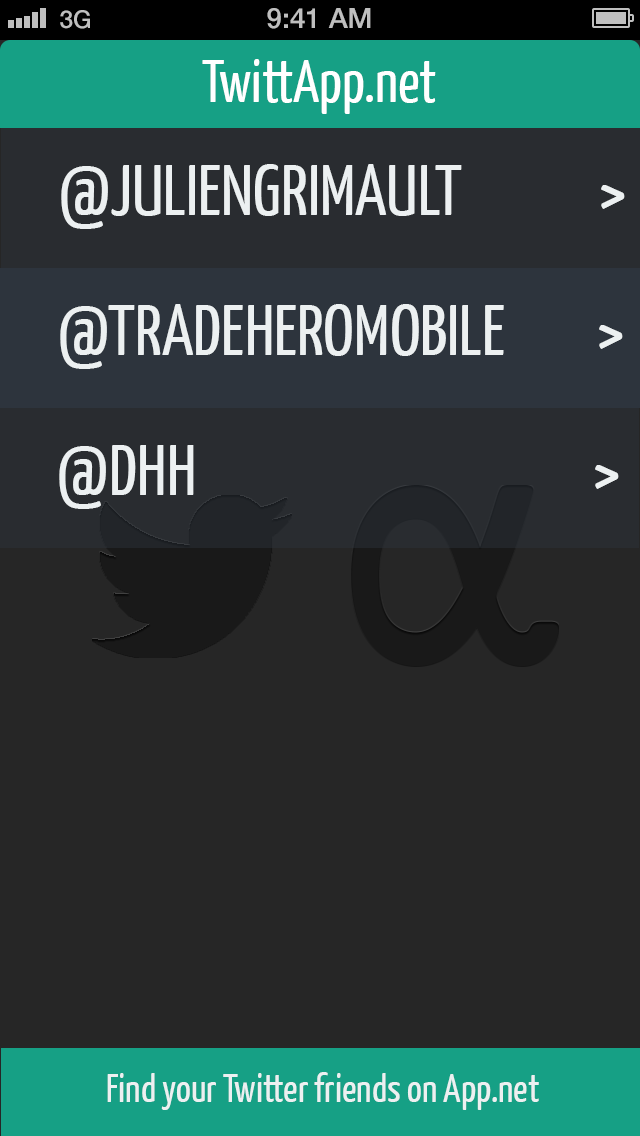
<style>
.page{position:relative;width:640px;height:1136px;background:#262626}
.page>*{position:absolute;margin:0}
.t1{font:24.5px "HelveticaNeue-Medium";color:#bfbfbf}
.t2{font:28.1px "HelveticaNeue-Medium";color:#bfbfbf}
.t3{font:60px "YanoneKaffeesatz-Regular";color:#ffffff}
.t4{font:72px "YanoneKaffeesatz-Regular";color:#ecf0f1}
.t5{font:40px "YanoneKaffeesatz-Regular";color:#ecf0f1}
</style>
<div class="page">
<p class="t1" style="left:60px;top:10px;width:30px;height:19px">3G</p>
<p class="t2" style="left:267px;top:8px;width:104px;height:21px">9:41 AM</p>
<p class="t3" style="left:202px;top:59px;width:234px;height:55px">TwittApp.net</p>
<p class="t4" style="left:61px;top:164px;width:564px;height:65px">@JULIENGRIMAULT            &gt;</p>
<p class="t4" style="left:60px;top:304px;width:563px;height:65px">@TRADEHEROMOBILE        &gt;</p>
<p class="t4" style="left:59px;top:445px;width:560px;height:64px">@DHH                                   &gt;</p>
<p class="t5" style="left:107px;top:1072px;width:432px;height:38px">Find your Twitter friends on App.net</p>
</div>
